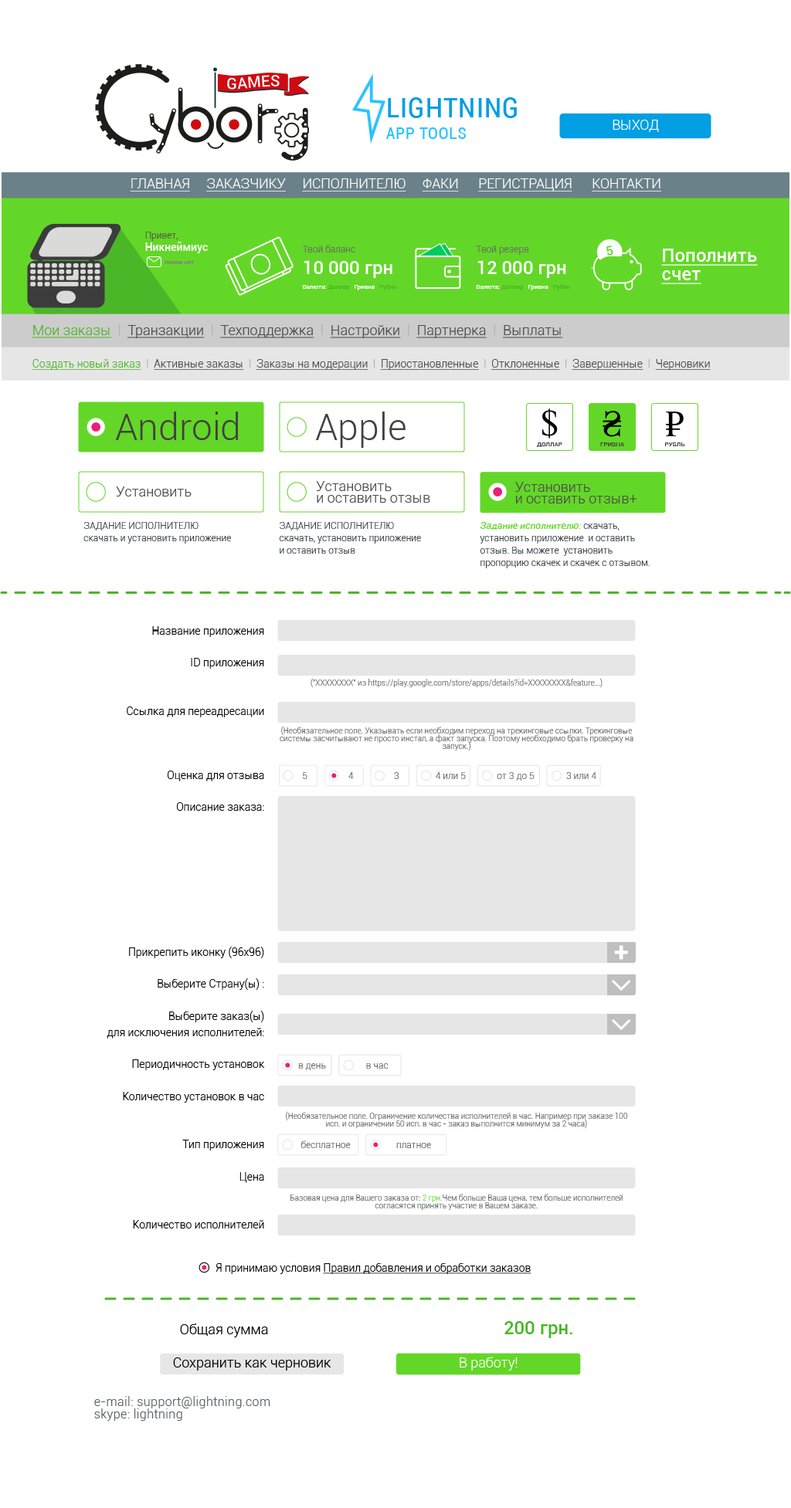
<style>
.page{position:relative;width:791px;height:1508px;background:#ffffff}
.page>*{position:absolute;margin:0}
.t1{font:28.9px "Roboto-Condensed";letter-spacing:0.025em;color:#009ee3;text-transform:uppercase}
.t2{font:13.7px "Roboto-Light";color:#ffffff;text-transform:uppercase}
.t3{font:17.3px "Roboto-Condensed";letter-spacing:0.025em;color:#2cc3ff;text-transform:uppercase}
.t4{font:13.7px "Roboto-Light";color:#ffffff;text-transform:uppercase;text-decoration:underline}
.t5{font:9.3px "Roboto-Light";color:#4d4d4d}
.t6{font:10.8px "Roboto-Medium";color:#ffffff}
.t7{font:9.3px "Roboto-Light";color:#666666}
.t8{font:18.5px "Roboto-Medium";color:#ffffff}
.t9{font:18.5px/18.5px "Roboto-Medium";color:#ffffff;text-decoration:underline}
.t10{font:6.2px "Roboto-Medium";color:#808080}
.t11{font:6.2px "Roboto-Medium";color:#ffffff}
.t12{font:6.2px "Roboto-Medium";color:#4bb627}
.t13{font:13.9px "Roboto-Light";color:#4d4d4d;text-decoration:underline}
.t14{font:13.9px "Roboto-Light";color:#4bb627;text-decoration:underline}
.t15{font:13.9px "Roboto-Light";color:#b3b3b3}
.t16{font:10.8px "Roboto-Light";color:#4bb627;text-decoration:underline}
.t17{font:10.8px "Roboto-Light";color:#b3b3b3}
.t18{font:10.8px "Roboto-Light";color:#4d4d4d;text-decoration:underline}
.t19{font:37.1px "Roboto-Light";color:#414140}
.t20{font:6.2px "Roboto-Medium";color:#414140;text-transform:uppercase}
.t21{font:13.9px/11.4px "Roboto-Light";color:#4d4d4d}
.t22{font:13.9px "Roboto-Light";color:#4d4d4d}
.t23{font:9.3px/12.4px "Roboto-Light";color:#333c40}
.t24{font:9.3px/12.4px "Roboto-Light";color:#333c40;text-transform:uppercase}
.t25{font:9.3px/12.4px "Roboto-Italic";color:#63d727}
.t26{font:10.8px/11.4px "Roboto-Light";color:#000000}
.t27{font:7.7px "Roboto-Light";color:#666666}
.t28{font:7.7px/7.7px "Roboto-Light";color:#666666}
.t29{font:7.7px/7.7px "Roboto-Light";color:#63d727}
.t30{font:10.8px "Roboto-Light";color:#000000;text-decoration:underline}
.t31{font:10.8px "Roboto-Light";color:#000000}
.t32{font:13.9px "Roboto-Light";color:#000000}
.t33{font:18.5px "Roboto-Medium";color:#4bb627}
.t34{font:13.9px "Roboto-Light";color:#ffffff}
.t35{font:12.4px/12.4px "Roboto-Light";letter-spacing:0.025em;color:#546063}
</style>
<div class="page">
<p class="t1" style="left:388px;top:97px;width:129px;height:21px">lightning</p>
<p class="t2" style="left:612px;top:120px;width:47px;height:12px">Выход</p>
<p class="t3" style="left:386px;top:127px;width:80px;height:12px">app tools</p>
<p class="t4" style="left:130px;top:178px;width:531px;height:13px">Главная     Заказчику     Исполнителю     Факи      регистрация      контакти</p>
<p class="t5" style="left:145px;top:232px;width:33px;height:9px">Привет,</p>
<p class="t6" style="left:145px;top:242px;width:63px;height:11px">Никнеймиус</p>
<p class="t7" style="left:302px;top:245px;width:90px;height:33px">Твой баланс <br><span class="t8">10 000 грн</span></p>
<p class="t7" style="left:476px;top:246px;width:90px;height:32px">Твой резерв<br><span class="t8">12 000 грн</span></p>
<p class="t9" style="left:661px;top:249px;width:97px;height:35px">Пополнить счет</p>
<p class="t10" style="left:164px;top:261px;width:30px;height:3px">писем нет</p>
<p class="t11" style="left:303px;top:284px;width:94px;height:6px">Валюта: <span class="t12">Доллар   </span>Гривна<span class="t12">   Рубль</span></p>
<p class="t11" style="left:476px;top:284px;width:94px;height:6px">Валюта: <span class="t12">Доллар   </span>Гривна<span class="t12">   Рубль</span></p>
<p class="t13" style="left:32px;top:324px;width:530px;height:14px"><span class="t14">Мои заказы </span><span class="t15"> l  </span>Транзакции<span class="t15">  l  </span>Техподдержка<span class="t15">  l  </span>Настройки<span class="t15">  l  </span>Партнерка<span class="t15">  l  </span>Выплаты</p>
<p class="t16" style="left:32px;top:359px;width:678px;height:11px">Создать новый заказ<span class="t17">  l  </span><span class="t18">Активные заказы</span><span class="t17">  l  </span><span class="t18">Заказы на модерации</span><span class="t17">  l  </span><span class="t18">Приостановленные</span><span class="t17">  l  </span><span class="t18">Отклоненные</span><span class="t17">  l  </span><span class="t18">Завершенные</span><span class="t17">  l  </span><span class="t18">Черновики</span></p>
<p class="t19" style="left:115px;top:412px;width:123px;height:28px">Android</p>
<p class="t19" style="left:315px;top:412px;width:90px;height:36px">Apple</p>
<p class="t20" style="left:537px;top:442px;width:25px;height:5px">Доллар</p>
<p class="t20" style="left:600px;top:442px;width:24px;height:4px">гривна</p>
<p class="t20" style="left:665px;top:442px;width:20px;height:4px">рубль</p>
<p class="t21" style="left:316px;top:481px;width:114px;height:22px">Установить <br>и оставить отзыв</p>
<p class="t21" style="left:515px;top:482px;width:122px;height:21px">Установить <br>и оставить отзыв+</p>
<p class="t22" style="left:116px;top:486px;width:75px;height:11px">Установить</p>
<p class="t23" style="left:83px;top:522px;width:149px;height:22px"><span class="t24">задание исполнителю <br></span>скачать и установить приложение</p>
<p class="t23" style="left:279px;top:522px;width:142px;height:32px"><span class="t24">задание исполнителю <br></span>скачать, установить приложение  <br>и оставить отзыв</p>
<p class="t23" style="left:480px;top:522px;width:169px;height:46px"><span class="t25">Задание исполнителю: </span>скачать, установить приложение  и оставить отзыв. Вы можете  установить пропорцию скачек и скачек с отзывом.</p>
<p class="t26" style="left:107px;top:626px;width:158px;height:603px;text-align:right">Название приложения<br><br>ID приложения<br><br><br>Ссылка для переадресации<br><br><br><br>Оценка для отзыва<br><br>Описание заказа:<br><br><br><br><br><br><br><br><br>Прикрепить иконку (96х96)<br><br>Выберите Страну(ы) :<br><br>Выберите заказ(ы) <br>для исключения исполнителей:<br><br>Периодичность установок<br><br>Количество установок в час<br><br><br>Тип приложения<br><br>Цена<br><br><br>Количество исполнителей</p>
<p class="t27" style="left:310px;top:678px;width:292px;height:9px">("XXXXXXXX" из https://play.google.com/store/apps/details?id=XXXXXXXX&amp;feature...)</p>
<p class="t28" style="left:280px;top:726px;width:353px;height:25px;text-align:center">(Необязательное поле. Указывать если необходим переход на трекинговые ссылки. Трекинговые системы засчитывают не просто инстал, а факт запуска. Поэтому необходимо брать проверку на запуск.)</p>
<p class="t7" style="left:303px;top:772px;width:4px;height:7px">5</p>
<p class="t7" style="left:348px;top:772px;width:6px;height:7px">4</p>
<p class="t7" style="left:394px;top:772px;width:5px;height:7px">3</p>
<p class="t7" style="left:436px;top:772px;width:30px;height:7px">4 или 5</p>
<p class="t7" style="left:497px;top:772px;width:37px;height:9px">от 3 до 5</p>
<p class="t7" style="left:566px;top:772px;width:30px;height:7px">3 или 4</p>
<p class="t7" style="left:298px;top:1063px;width:28px;height:7px">в день</p>
<p class="t7" style="left:366px;top:1063px;width:22px;height:6px">в час</p>
<p class="t28" style="left:286px;top:1111px;width:342px;height:17px;text-align:center">(Необязательное поле. Ограничение количества исполнителей в час. Например при заказе 100 исп. и ограничении 50 исп. в час - заказ выполнится минимум за 2 часа)</p>
<p class="t7" style="left:300px;top:1141px;width:51px;height:7px">бесплатное</p>
<p class="t7" style="left:396px;top:1143px;width:35px;height:5px">платное</p>
<p class="t28" style="left:290px;top:1194px;width:332px;height:16px;text-align:center">Базовая цена для Вашего заказа от: <span class="t29">2 грн.</span>Чем больше Ваша цена, тем больше исполнителей согласятся принять участие в Вашем заказе.</p>
<p class="t30" style="left:215px;top:1263px;width:316px;height:11px"><span class="t31">Я принимаю условия </span>Правил добавления и обработки заказов</p>
<p class="t32" style="left:180px;top:1321px;width:392px;height:17px">Общая сумма <span class="t33">200 грн.</span></p>
<p class="t32" style="left:173px;top:1357px;width:158px;height:14px">Сохранить как черновик</p>
<p class="t34" style="left:459px;top:1357px;width:58px;height:14px">В работу!</p>
<p class="t35" style="left:94px;top:1396px;width:176px;height:25px">e-mail: support@lightning.com <br>skype: lightning</p>
</div>
